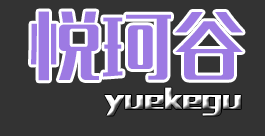
<style>
.page{position:relative;width:265px;height:136px;background:#333333}
.page>*{position:absolute;margin:0}
.t1{font:72px "MFLangQian_Noncommercial-Regular";color:#9d7ae3}
.t2{font:23px "MFLiHei_Noncommercial-Regular";font-weight:bold}
</style>
<div class="page">
<p class="t1" style="left:31px;top:11px;width:212px;height:70px">悦珂谷</p>
<p class="t2" style="left:104px;top:87px;width:137px;height:29px">yuekegu</p>
</div>
